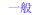
<style>
.page{position:relative;width:40px;height:15px;background:#ffffff}
.page>*{position:absolute;margin:0}
.t1{font:12px "SimSun"}
</style>
<div class="page">
<p class="t1" style="left:8px;top:2px;width:24px;height:11px">一般</p>
</div>
